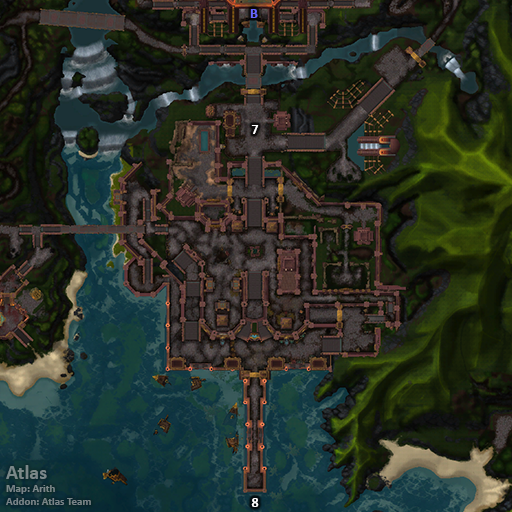
<style>
.page{position:relative;width:512px;height:512px}
.page>*{position:absolute;margin:0}
.t1{font:14px "Calibri-Bold";color:#6666ff}
.t2{font:14px "Calibri-Bold";color:#ffffff}
.t3{font:11px "Calibri-Bold";color:#798688}
.t4{font:20px "Calibri-Bold";color:#798688}
</style>
<div class="page">
<p class="t1" style="left:250px;top:9px;width:8px;height:9px">B</p>
<p class="t2" style="left:251px;top:125px;width:8px;height:9px">7</p>
<p class="t3" style="left:6px;top:465px;width:85px;height:40px"><span class="t4">Atlas<br></span>Map: Arith<br>Addon: Atlas Team</p>
<p class="t2" style="left:251px;top:498px;width:8px;height:9px">8</p>
</div>
